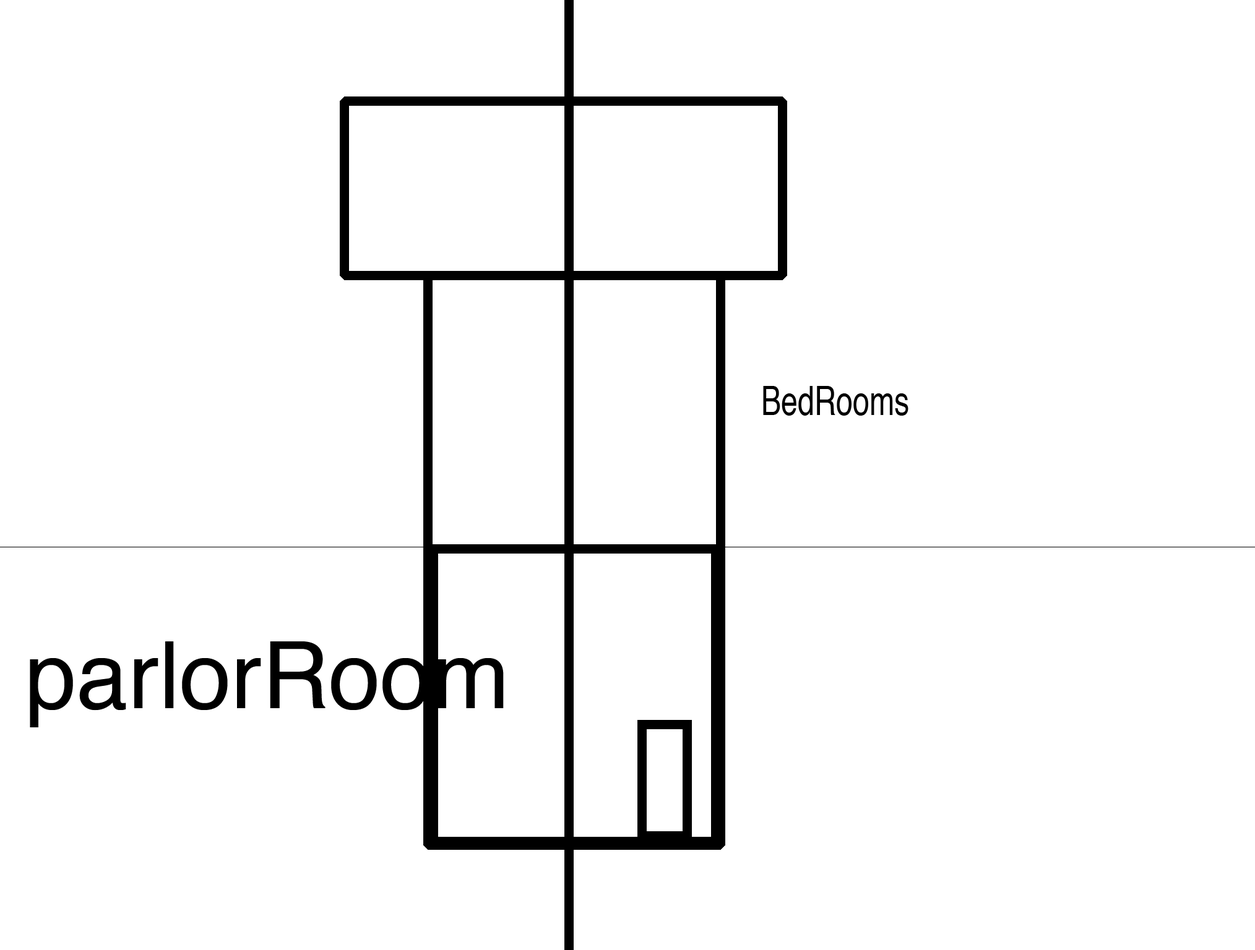
<style>
.page{position:relative;width:1255px;height:950px;background:#ffffff}
.page>*{position:absolute;margin:0}
.t1{font:40.4px "Helvetica";letter-spacing:-0.001em;color:#000000;scale:0.74 1}
.t2{font:92.8px "Helvetica";letter-spacing:-0.001em;color:#000000}
</style>
<div class="page">
<p class="t1" style="left:763px;top:386px;width:145px;height:30px">BedRooms</p>
<p class="t2" style="left:30px;top:642px;width:474px;height:86px">parlorRoom</p>
</div>
